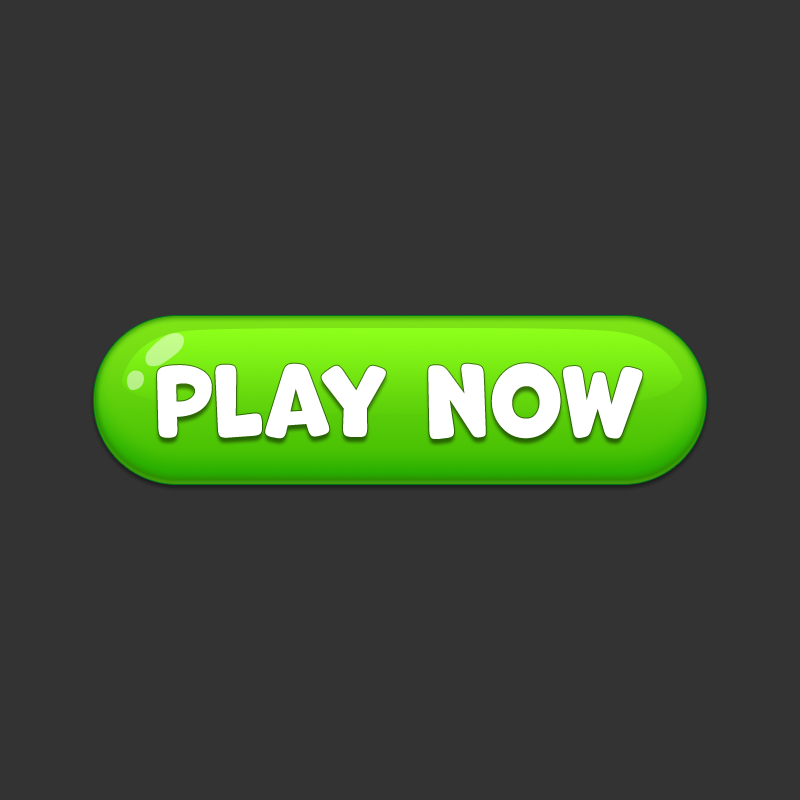
<style>
.page{position:relative;width:800px;height:800px;background:#333333}
.page>*{position:absolute;margin:0}
.t1{font:94.1px "Marvin-Round";color:#ffffff}
</style>
<div class="page">
<p class="t1" style="left:157px;top:363px;width:486px;height:76px">play now</p>
</div>
